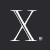
<style>
.page{position:relative;width:50px;height:50px;background:#2b2a2e}
.page>*{position:absolute;margin:0}
.t1{font:43.1px "Castellar";color:#ffffff;scale:0.69 1}
</style>
<div class="page">
<p class="t1" style="left:10px;top:10px;width:27px;height:31px">x</p>
</div>
